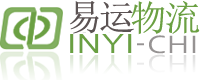
<style>
.page{position:relative;width:201px;height:80px;background:#ffffff}
.page>*{position:absolute;margin:0}
.t1{font:36px "SimSun";color:#5b5353}
.t2{font:36px "SimSun";color:#6ba043}
</style>
<div class="page">
<p class="t1" style="left:70px;top:1px;width:64px;height:33px">易运</p>
<p class="t2" style="left:131px;top:1px;width:69px;height:34px">物流</p>
</div>
